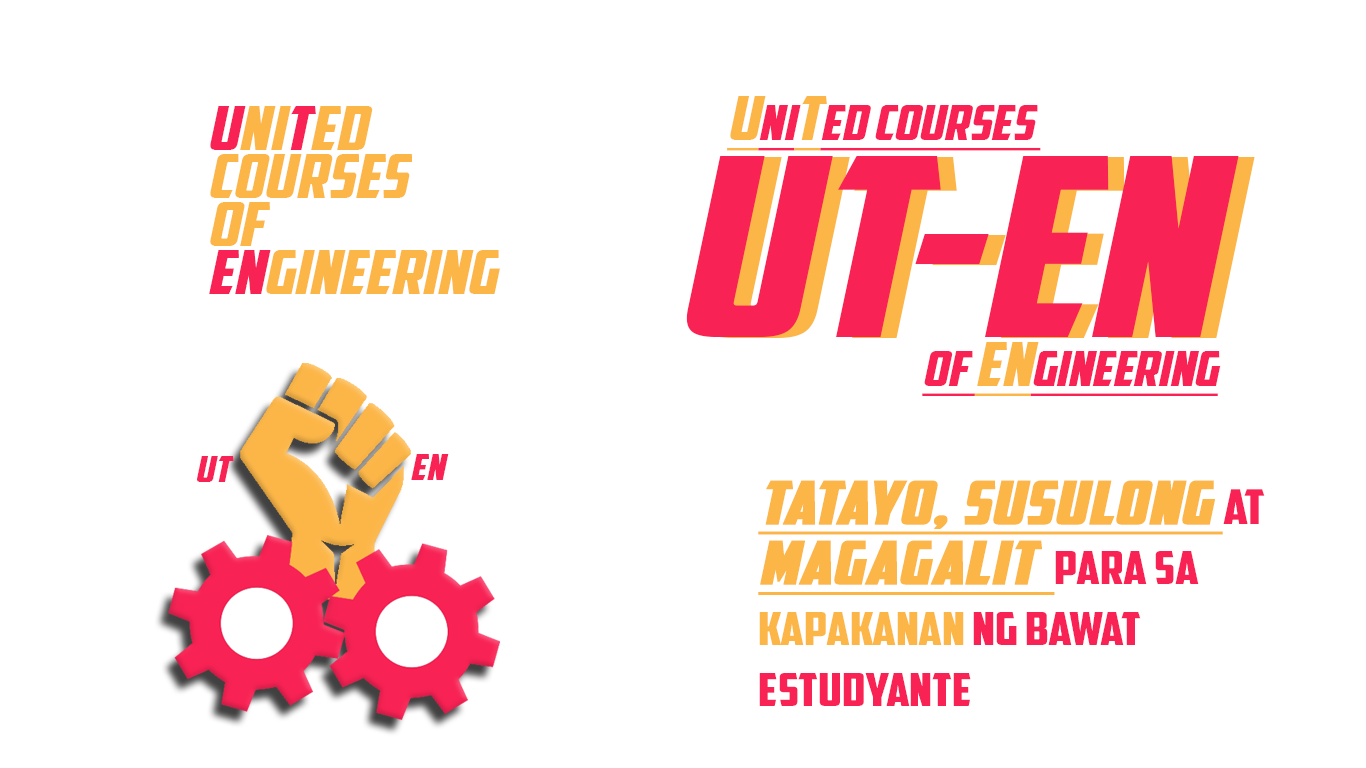
<style>
.page{position:relative;width:1366px;height:768px;background:#ffffff}
.page>*{position:absolute;margin:0}
.t1{font:48.1px "AmericanCaptain";color:#f82254;font-style:italic;text-decoration:underline;scale:1.2 1}
.t2{font:60.1px "AmericanCaptain";color:#fcb648;font-style:italic;text-decoration:underline;scale:1.2 1}
.t3{font:60px "AmericanCaptain";color:#fcb648;font-style:italic;text-decoration:underline;scale:1.2 1}
.t4{font:48px "AmericanCaptain";color:#f82254;font-style:italic;text-decoration:underline;scale:1.2 1}
.t5{font:60px/48px "AmericanCaptain";color:#fcb648;font-style:italic;scale:1.2 1}
.t6{font:60px/48px "AmericanCaptain";color:#f82254;font-style:italic;scale:1.2 1}
.t7{font:250.3px "AmericanCaptain";color:#f82254;font-style:italic;scale:1.2 1}
.t8{font:36px "AmericanCaptain";color:#f82254;font-style:italic;scale:1.2 1}
.t9{font:45.4px/60.5px "AmericanCaptain";color:#f82254;scale:1.2 1}
.t10{font:60px/60.5px "AmericanCaptain";color:#fcb648;font-weight:bold;font-style:italic;text-decoration:underline;scale:1.2 1}
.t11{font:48px/60.5px "AmericanCaptain";color:#f82254;scale:1.2 1}
.t12{font:45.4px/60.5px "AmericanCaptain";color:#fcb648;scale:1.2 1}
</style>
<div class="page">
<p class="t1" style="left:727px;top:96px;width:314px;height:55px"><span class="t2">u</span>NI<span class="t3">T</span><span class="t4">e</span>D COURSES</p>
<p class="t5" style="left:209px;top:106px;width:291px;height:188px"><span class="t6">u</span>ni<span class="t6">t</span>ed<br>courses<br>of<br><span class="t6">en</span>gineering</p>
<p class="t7" style="left:686px;top:156px;width:553px;height:181px">uT-en</p>
<p class="t7" style="left:703px;top:157px;width:552px;height:181px">uT-en</p>
<p class="t1" style="left:922px;top:342px;width:299px;height:54px">OF <span class="t2">EN</span>GINEERING</p>
<p class="t8" style="left:197px;top:456px;width:37px;height:26px">ut</p>
<p class="t8" style="left:411px;top:454px;width:38px;height:26px">en</p>
<p class="t9" style="left:758px;top:480px;width:507px;height:226px"><span class="t10">tatayo, susulong </span><span class="t11">at<br></span><span class="t10">magagalit  </span>para sa<span class="t12"> <br>kapakanan </span>ng bawat <br>estudyante</p>
</div>
